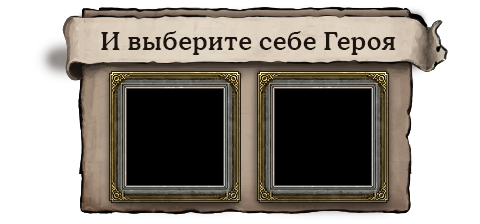
<style>
.page{position:relative;width:480px;height:224px;background:#ffffff}
.page>*{position:absolute;margin:0}
.t1{font:25px "CooperMediumCBT";letter-spacing:0.03em;color:#1d1410}
</style>
<div class="page">
<p class="t1" style="left:101px;top:31px;width:295px;height:24px">И выберите себе Героя</p>
</div>
